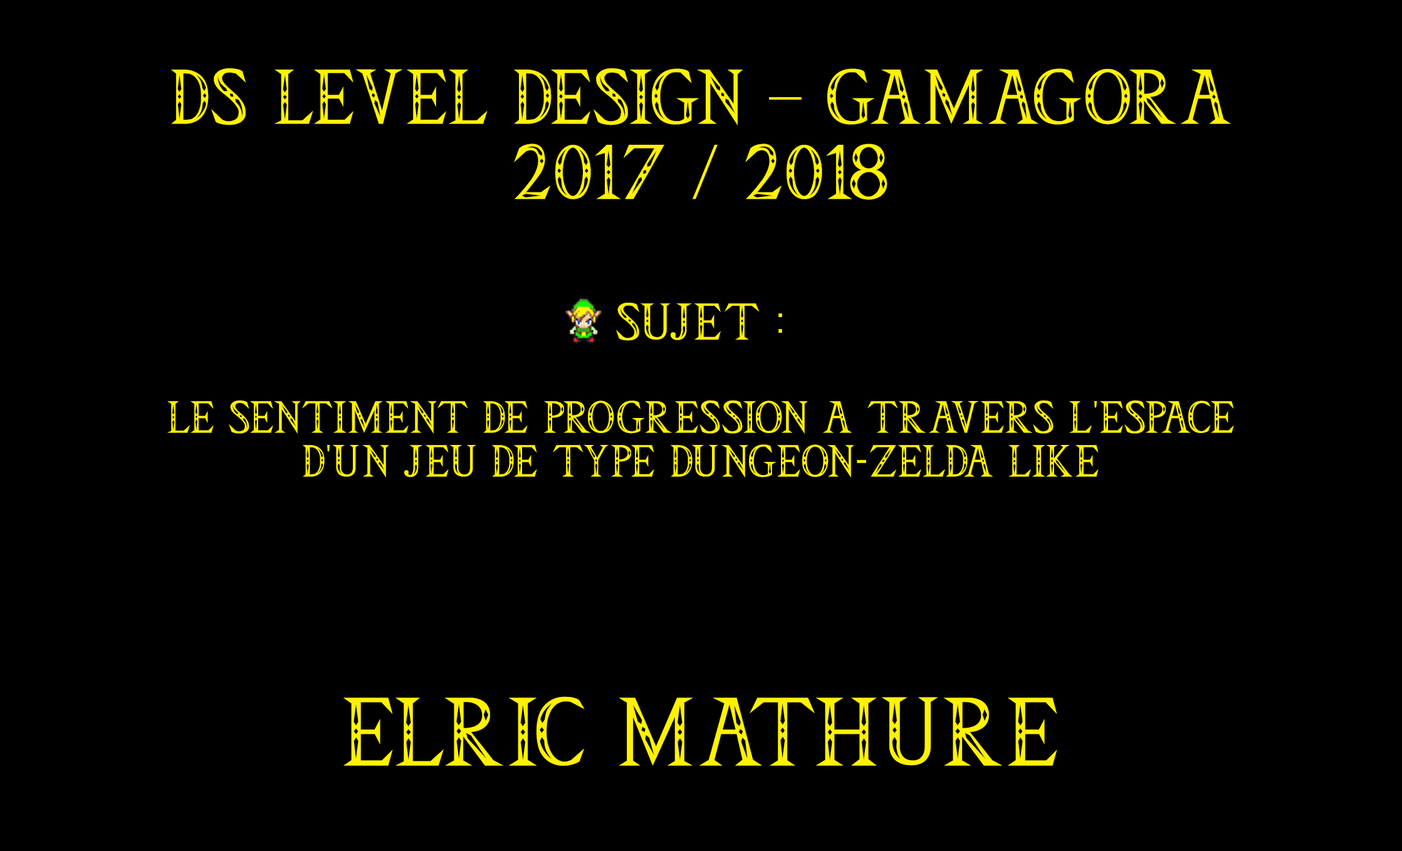
<style>
.page{position:relative;width:1402px;height:851px;background:#000000}
.page>*{position:absolute;margin:0}
.t1{font:36.5px "Triforce";letter-spacing:0.062em;color:#fff200}
.t2{font:62.7px "Triforce";letter-spacing:0.062em;color:#fff200}
.t3{font:62.7px "TimesNewRomanPSMT";letter-spacing:0.062em;color:#fff200}
.t4{font:41.8px "Triforce";letter-spacing:0.062em;color:#fff200}
.t5{font:78.3px "Triforce";letter-spacing:0.062em;color:#fff200}
</style>
<div class="page">
<p class="t1" style="left:167px;top:68px;width:1067px;height:698px;text-align:center"><span class="t2"><br>DS LEVEL DESIGN </span><span class="t3">–</span><span class="t2"> GAMAGORA<br>2017 / 2018<br><br></span><span class="t4">SUJET : <br><br></span>LE SENTIMENT DE PROGRESSION A TRAVERS L'ESPACE D'UN JEU DE TYPE DUNGEON-ZELDA LIKE<br><span class="t5"><br><br>ELRIC MATHURE</span></p>
</div>
